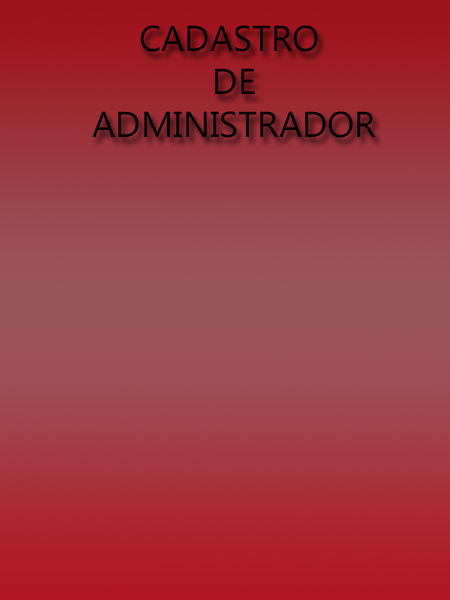
<style>
.page{position:relative;width:450px;height:600px}
.page>*{position:absolute;margin:0}
.t1{font:36px "MicrosoftPhagsPa";color:#000000}
</style>
<div class="page">
<p class="t1" style="left:92px;top:25px;width:284px;height:113px;text-align:center">CADASTRO <br>DE<br>ADMINISTRADOR</p>
</div>
